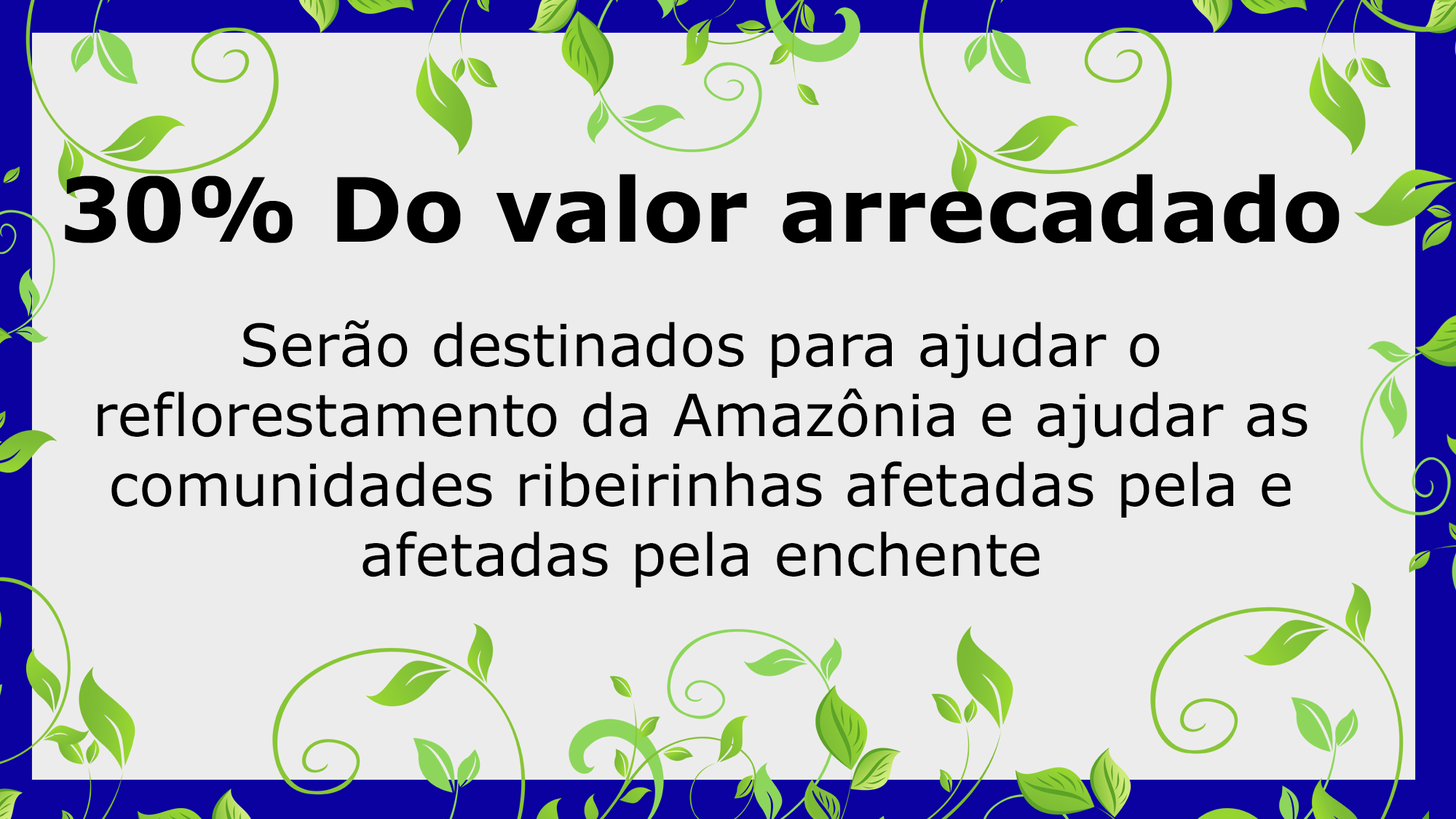
<style>
.page{position:relative;width:1456px;height:819px;background:#edecec}
.page>*{position:absolute;margin:0}
.t1{font:88.8px "Verdana-Bold";letter-spacing:0.002em;color:#000000}
.t2{font:58.2px "Verdana";letter-spacing:0.002em;color:#000000}
</style>
<div class="page">
<p class="t1" style="left:65px;top:174px;width:1275px;height:69px">30% Do valor arrecadado</p>
<p class="t2" style="left:98px;top:320px;width:1209px;height:267px;text-align:center">Serão destinados para ajudar o reflorestamento da Amazônia e ajudar as comunidades ribeirinhas afetadas pela e afetadas pela enchente</p>
</div>
